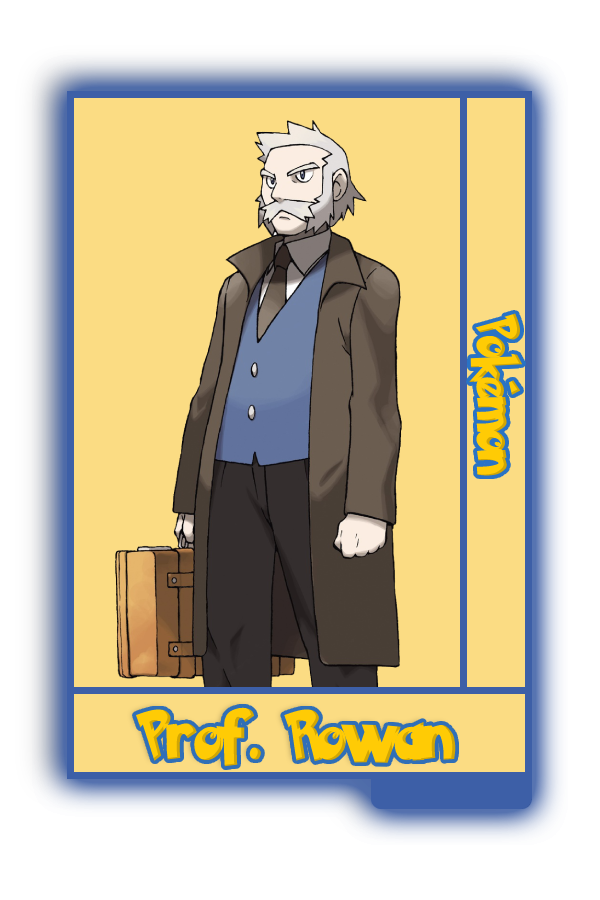
<style>
.page{position:relative;width:600px;height:900px;background:#fbdc83}
.page>*{position:absolute;margin:0}
.t1{font:48.8px "PokemonSolidNormal";color:#ffcb05;scale:0.8 1}
.t2{font:56.6px "PokemonSolidNormal";color:#ffcb05;scale:0.92 1}
</style>
<div class="page">
<p class="t1" style="left:469px;top:313px;width:54px;height:163px;rotate:90deg">Pokémon</p>
<p class="t2" style="left:135px;top:707px;width:321px;height:60px">Prof. Rowan</p>
</div>
